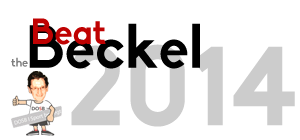
<style>
.page{position:relative;width:300px;height:140px;background:#ffffff}
.page>*{position:absolute;margin:0}
.t1{font:60px "Biko-Bold";color:#000000}
.t2{font:36px "Biko-Bold";color:#bf0202}
.t3{font:110px "Biko-Bold";color:#cccccc}
.t4{font:12px "Biko-Bold";color:#7f7f7f}
</style>
<div class="page">
<p class="t1" style="left:29px;top:23px;width:171px;height:46px">Beckel</p>
<p class="t2" style="left:33px;top:18px;width:73px;height:27px">Beat</p>
<p class="t3" style="left:71px;top:44px;width:224px;height:83px">2014</p>
<p class="t4" style="left:11px;top:57px;width:17px;height:10px">the</p>
</div>
